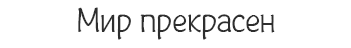
<style>
.page{position:relative;width:351px;height:48px;background:#ffffff}
.page>*{position:absolute;margin:0}
.t1{font:35px "Plainot";color:#2e2e2e}
</style>
<div class="page">
<p class="t1" style="left:78px;top:7px;width:197px;height:33px">Мир прекрасен</p>
</div>
